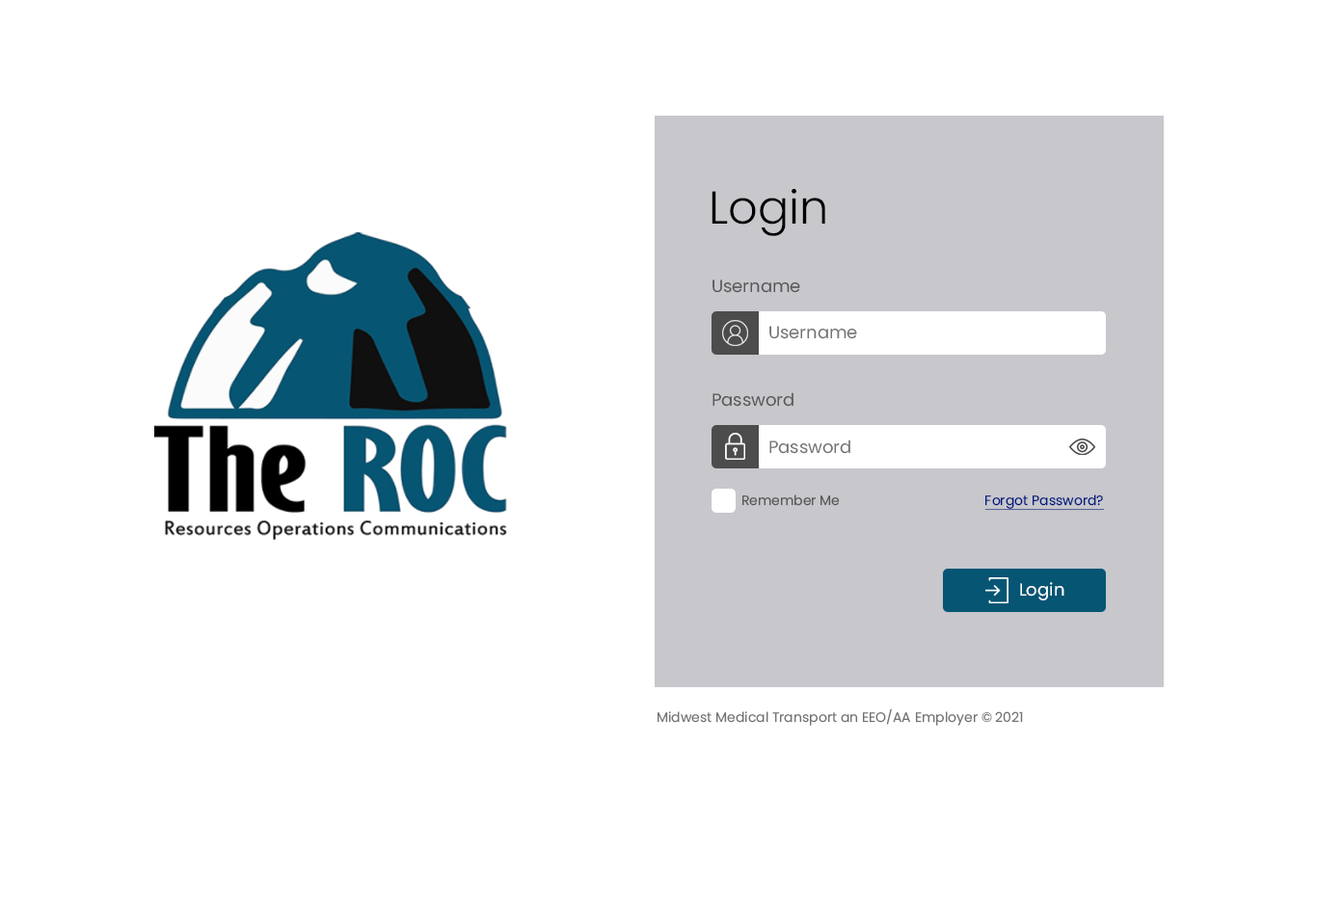
<style>
.page{position:relative;width:1317px;height:905px;background:#ffffff}
.page>*{position:absolute;margin:0}
.t1{font:46.3px "Poppins-Light";color:#000000}
.t2{font:17.4px "Poppins-Regular";color:#58585b}
.t3{font:17.4px "Poppins-Regular";color:#737373}
.t4{font:13.5px "Poppins-Regular";color:#58585b}
.t5{font:13.5px "Poppins-Regular";color:#011b80;text-decoration:underline}
.t6{font:17.4px "Poppins-Regular";color:#ffffff}
.t7{font:13.5px "Poppins-Regular";color:#737373}
</style>
<div class="page">
<p class="t1" style="left:712px;top:189px;width:113px;height:47px">Login</p>
<p class="t2" style="left:713px;top:280px;width:87px;height:13px">Username</p>
<p class="t3" style="left:769px;top:326px;width:88px;height:13px">Username</p>
<p class="t2" style="left:713px;top:392px;width:81px;height:15px">Password</p>
<p class="t3" style="left:769px;top:440px;width:81px;height:14px">Password</p>
<p class="t4" style="left:742px;top:495px;width:98px;height:11px">Remember Me</p>
<p class="t5" style="left:984px;top:495px;width:120px;height:16px">Forgot Password?</p>
<p class="t6" style="left:1020px;top:582px;width:44px;height:19px">Login</p>
<p class="t7" style="left:658px;top:709px;width:365px;height:17px">Midwest Medical Transport an EEO/AA Employer © 2021</p>
</div>
